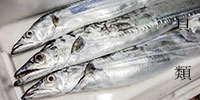
<style>
.page{position:relative;width:200px;height:100px}
.page>*{position:absolute;margin:0}
.t1{font:17.6px/24px "YuMincho-Regular";color:#000000;scale:0.91 1}
</style>
<div class="page">
<p class="t1" style="left:174px;top:18px;width:18px;height:63px;text-align:justify">貝　　類</p>
</div>
